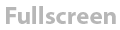
<style>
.page{position:relative;width:120px;height:30px;background:#ffffff}
.page>*{position:absolute;margin:0}
.t1{font:25px "MyriadPro-Bold";color:#b7b7b7}
</style>
<div class="page">
<p class="t1" style="left:6px;top:6px;width:110px;height:18px">Fullscreen</p>
</div>
